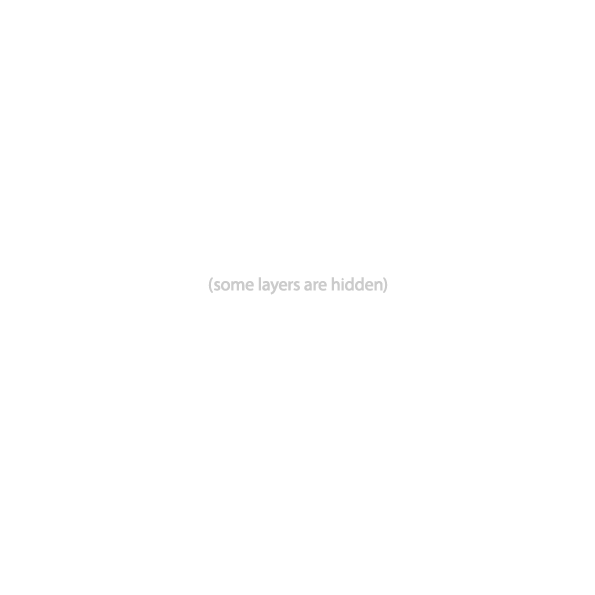
<style>
.page{position:relative;width:595px;height:595px;background:#ffffff}
.page>*{position:absolute;margin:0}
.t1{font:17.8px "MyriadPro-Regular";letter-spacing:-0.03em;color:#cacaca;font-weight:bold}
</style>
<div class="page">
<p class="t1" style="left:208px;top:277px;width:180px;height:18px">(some layers are hidden)</p>
</div>
